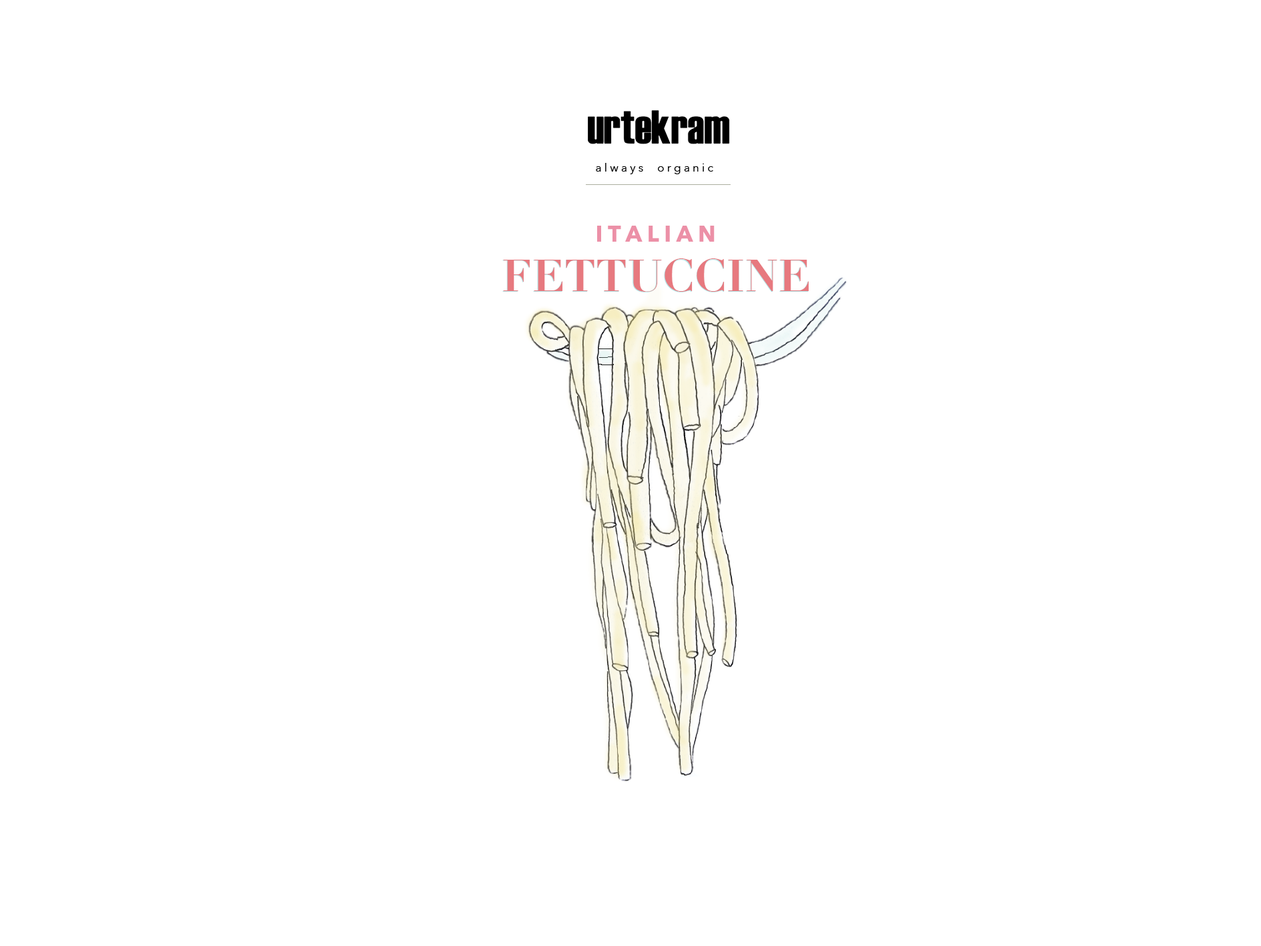
<style>
.page{position:relative;width:1261px;height:946px;background:#ffffff}
.page>*{position:absolute;margin:0}
.t1{font:11.1px "AvenirNext-Regular";letter-spacing:0.004em;color:#000000}
.t2{font:44.5px "Didot-Bold";letter-spacing:0.004em;color:#e7797f}
.t3{font:22.2px "AvenirNext-Bold";letter-spacing:0.004em;color:#010101}
.t4{font:22.2px "AvenirNext-Regular";letter-spacing:0.004em;color:#000000}
</style>
<div class="page">
<p class="t1" style="left:596px;top:163px;width:117px;height:11px">a l w a y s     o r g a n i c</p>
<p class="t2" style="left:503px;top:258px;width:306px;height:34px"><span class="t3"><br></span><span class="t4"><br></span>FETTUCCINE</p>
</div>
